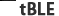
<style>
.page{position:relative;width:59px;height:16px;background:#ffffff}
.page>*{position:absolute;margin:0}
.t1{font:16px "AdobeGothicStd-Bold";color:#303030;font-weight:bold}
</style>
<div class="page">
<p class="t1" style="left:19px;top:2px;width:36px;height:14px">tBLE</p>
</div>
